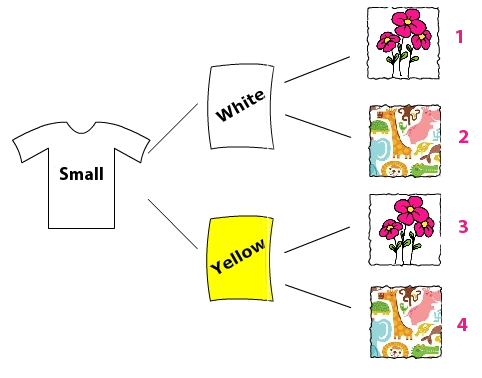
<style>
.page{position:relative;width:482px;height:378px;background:#ffffff}
.page>*{position:absolute;margin:0}
.t1{font:20px "MyriadPro-Bold";color:#e02286}
.t2{font:18px "MyriadPro-Bold";color:#020202}
</style>
<div class="page">
<p class="t1" style="left:456px;top:30px;width:6px;height:13px">1</p>
<p class="t1" style="left:459px;top:130px;width:10px;height:13px">2</p>
<p class="t2" style="left:59px;top:167px;width:44px;height:13px">Small</p>
<p class="t1" style="left:458px;top:220px;width:10px;height:13px">3</p>
<p class="t1" style="left:457px;top:318px;width:11px;height:13px">4</p>
</div>
